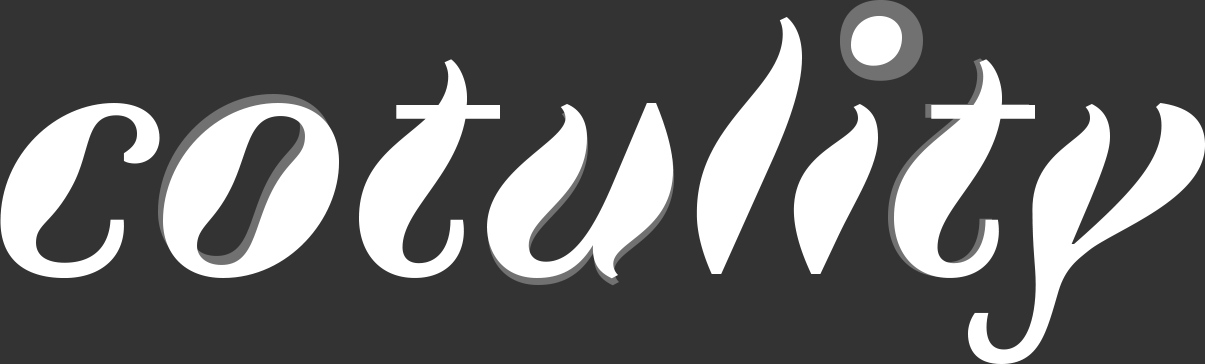
<style>
.page{position:relative;width:1205px;height:364px;background:#333333}
.page>*{position:absolute;margin:0}
.t1{font:362.4px "Faune-DisplayBoldItalic";color:#ffffff}
</style>
<div class="page">
<p class="t1" style="left:0px;top:15px;width:1205px;height:349px">cotulity</p>
<p class="t1" style="left:888px;top:58px;width:141px;height:219px;opacity:0.3">t</p>
<p class="t1" style="left:158px;top:94px;width:176px;height:175px;opacity:0.3">o</p>
<p class="t1" style="left:488px;top:110px;width:187px;height:176px;opacity:0.3">u</p>
</div>
